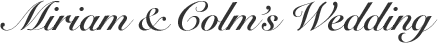
<style>
.page{position:relative;width:438px;height:43px;background:#ffffff}
.page>*{position:absolute;margin:0}
.t1{font:40px "SnellRoundhand-Bold";letter-spacing:-0.015em;color:#333333}
</style>
<div class="page">
<p class="t1" style="left:0px;top:0px;width:438px;height:43px">Miriam &amp; Colm’s Wedding</p>
</div>
